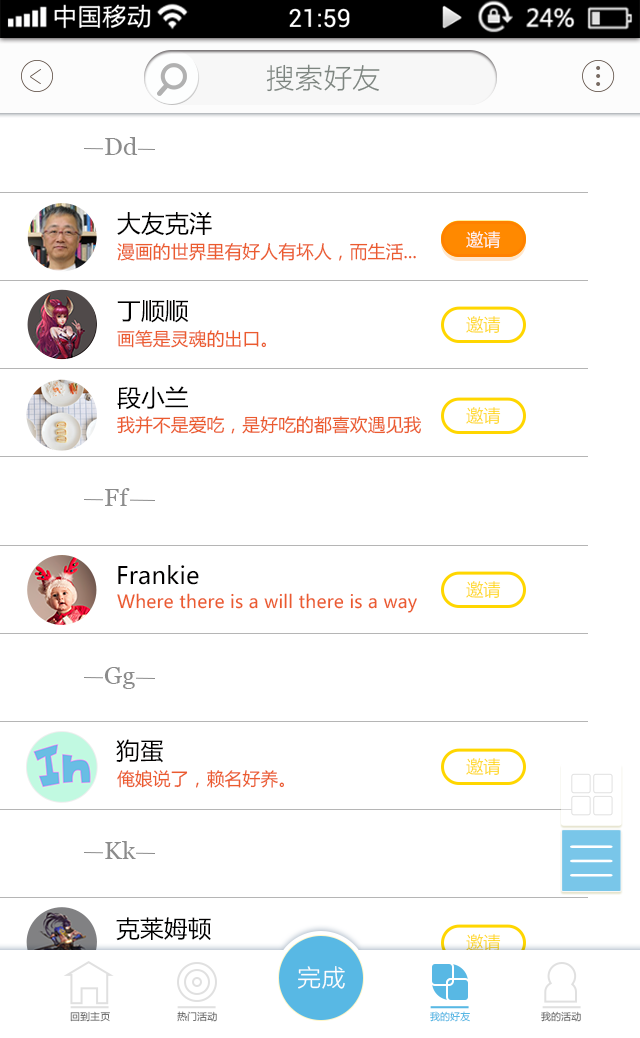
<style>
.page{position:relative;width:640px;height:1038px;background:#ffffff}
.page>*{position:absolute;margin:0}
.t1{font:28.3px "FZLTKHK--GBK1-0";letter-spacing:0.01em;color:#7d8580}
.t2{font:24px "Georgia";letter-spacing:0.01em;color:#8c8c8c;scale:1.05 1}
.t3{font:24px "MicrosoftYaHei";letter-spacing:0.01em;color:#010000}
.t4{font:18px "FZLTKHK--GBK1-0";letter-spacing:-0.05em;color:#fdfdfd}
.t5{font:17.9px "MicrosoftYaHei";letter-spacing:0.01em;color:#eb5b2e}
.t6{font:23.8px "MicrosoftYaHei";letter-spacing:0.01em;color:#010000}
.t7{font:18.2px "FZLTKHK--GBK1-0";letter-spacing:-0.05em}
.t8{font:23.7px "MicrosoftYaHei";letter-spacing:0.01em;color:#010000}
.t9{font:17.7px "MicrosoftYaHei";letter-spacing:0.01em;color:#eb5b2e}
.t10{font:24px "FZLTKHK--GBK1-0";letter-spacing:0.01em;color:#fefefe}
.t11{font:10.1px "FZLTKHK--GBK1-0";letter-spacing:0.01em;color:#717171}
.t12{font:10.1px "FZLTKHK--GBK1-0";letter-spacing:0.01em;color:#58b8e4}
</style>
<div class="page">
<p class="t1" style="left:266px;top:64px;width:114px;height:28px">搜索好友</p>
<p class="t2" style="left:105px;top:137px;width:33px;height:18px">Dd</p>
<p class="t3" style="left:117px;top:211px;width:95px;height:25px">大友克洋</p>
<p class="t4" style="left:466px;top:231px;width:35px;height:18px">邀请</p>
<p class="t5" style="left:117px;top:242px;width:299px;height:19px">漫画的世界里有好人有坏人，而生活...</p>
<p class="t6" style="left:117px;top:300px;width:72px;height:23px">丁顺顺</p>
<p class="t7" style="left:466px;top:316px;width:35px;height:17px">邀请</p>
<p class="t5" style="left:117px;top:330px;width:149px;height:18px">画笔是灵魂的出口。</p>
<p class="t8" style="left:117px;top:386px;width:71px;height:23px">段小兰</p>
<p class="t7" style="left:466px;top:407px;width:35px;height:17px">邀请</p>
<p class="t9" style="left:117px;top:416px;width:304px;height:18px">我并不是爱吃，是好吃的都喜欢遇见我</p>
<p class="t2" style="left:105px;top:488px;width:25px;height:18px">Ff</p>
<p class="t6" style="left:118px;top:565px;width:81px;height:20px">Frankie</p>
<p class="t7" style="left:466px;top:581px;width:35px;height:17px">邀请</p>
<p class="t5" style="left:117px;top:593px;width:300px;height:20px">Where there is a will there is a way</p>
<p class="t2" style="left:104px;top:667px;width:31px;height:22px">Gg</p>
<p class="t6" style="left:116px;top:739px;width:48px;height:24px">狗蛋</p>
<p class="t7" style="left:466px;top:758px;width:35px;height:17px">邀请</p>
<p class="t5" style="left:117px;top:770px;width:167px;height:18px">俺娘说了，赖名好养。</p>
<p class="t2" style="left:105px;top:841px;width:31px;height:18px">Kk</p>
<p class="t6" style="left:116px;top:917px;width:95px;height:24px">克莱姆顿</p>
<p class="t7" style="left:466px;top:934px;width:35px;height:17px">邀请</p>
<p class="t10" style="left:298px;top:966px;width:47px;height:23px">完成</p>
<p class="t11" style="left:70px;top:1011px;width:40px;height:11px">回到主页</p>
<p class="t11" style="left:177px;top:1011px;width:40px;height:11px">热门活动</p>
<p class="t12" style="left:430px;top:1011px;width:40px;height:11px">我的好友</p>
<p class="t11" style="left:541px;top:1011px;width:40px;height:11px">我的活动</p>
</div>
